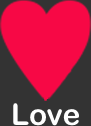
<style>
.page{position:relative;width:91px;height:126px;background:#f70845}
.page>*{position:absolute;margin:0}
.t1{font:30px "ArialRoundedMTBold";color:#fefefe}
</style>
<div class="page">
<p class="t1" style="left:13px;top:103px;width:66px;height:23px">Love</p>
</div>
